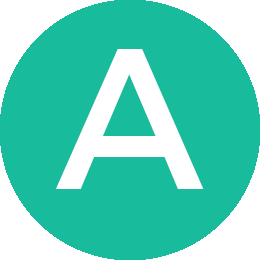
<style>
.page{position:relative;width:260px;height:260px;background:#18bc9c}
.page>*{position:absolute;margin:0}
.t1{font:200px "Montserrat-Regular";color:#ffffff}
</style>
<div class="page">
<p class="t1" style="left:56px;top:49px;width:148px;height:140px">A</p>
</div>
